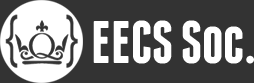
<style>
.page{position:relative;width:254px;height:83px;background:#333333}
.page>*{position:absolute;margin:0}
.t1{font:60px "FranchiseFree-Bold";color:#ffffff}
</style>
<div class="page">
<p class="t1" style="left:93px;top:20px;width:161px;height:44px">EECS Soc.</p>
</div>
